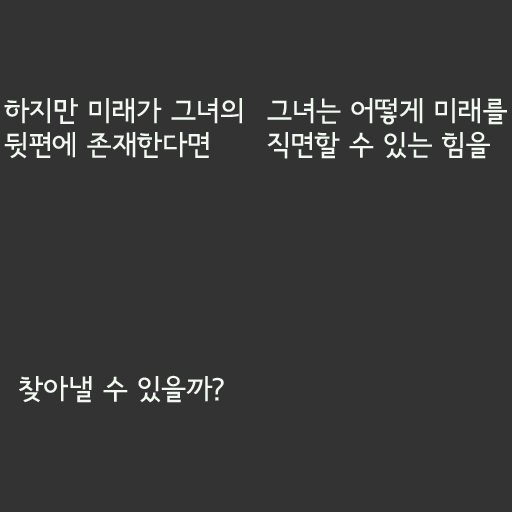
<style>
.page{position:relative;width:512px;height:512px;background:#333333}
.page>*{position:absolute;margin:0}
.t1{font:28px/34px "SeoulNamsanB";color:#f1f9f1}
.t2{font:28px "SeoulNamsanB";color:#f1f9f1}
</style>
<div class="page">
<p class="t1" style="left:4px;top:98px;width:238px;height:61px">하지만 미래가 그녀의 뒷편에 존재한다면</p>
<p class="t1" style="left:267px;top:98px;width:240px;height:61px">그녀는 어떻게 미래를<br>직면할 수 있는 힘을</p>
<p class="t2" style="left:19px;top:375px;width:205px;height:28px">찾아낼 수 있을까?</p>
</div>
